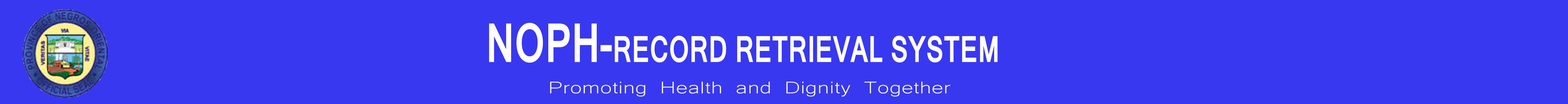
<style>
.page{position:relative;width:1568px;height:104px;background:#3838f1}
.page>*{position:absolute;margin:0}
.t1{font:35px "Kartika-Bold";color:#fefcfc;scale:0.71 1}
.t2{font:52px "Kartika-Bold";color:#fefcfc;scale:0.71 1}
.t3{font:21.9px "Microsoft-Yi-Baiti";color:#faf9d2;scale:1.33 1}
</style>
<div class="page">
<p class="t1" style="left:489px;top:23px;width:509px;height:40px"><span class="t2">NOPH-</span>RECORD RETRIEVAL SYSTEM</p>
<p class="t3" style="left:550px;top:82px;width:400px;height:15px">Promoting Health and Dignity Together</p>
</div>
